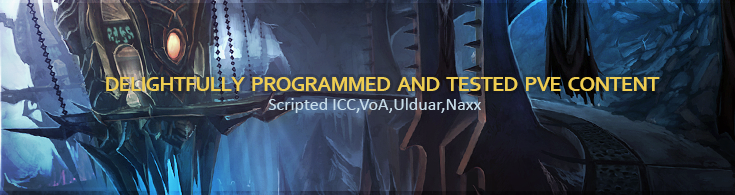
<style>
.page{position:relative;width:735px;height:195px}
.page>*{position:absolute;margin:0}
.t1{font:22px "Corbel-Bold";letter-spacing:-0.05em;color:#eecd51;text-transform:uppercase}
.t2{font:18px "Calibri";color:#c8deeb}
</style>
<div class="page">
<p class="t1" style="left:106px;top:77px;width:554px;height:14px">Delightfully  programmed  and  tested  PvE  content</p>
<p class="t2" style="left:268px;top:98px;width:213px;height:15px">Scripted ICC,VoA,Ulduar,Naxx</p>
</div>
